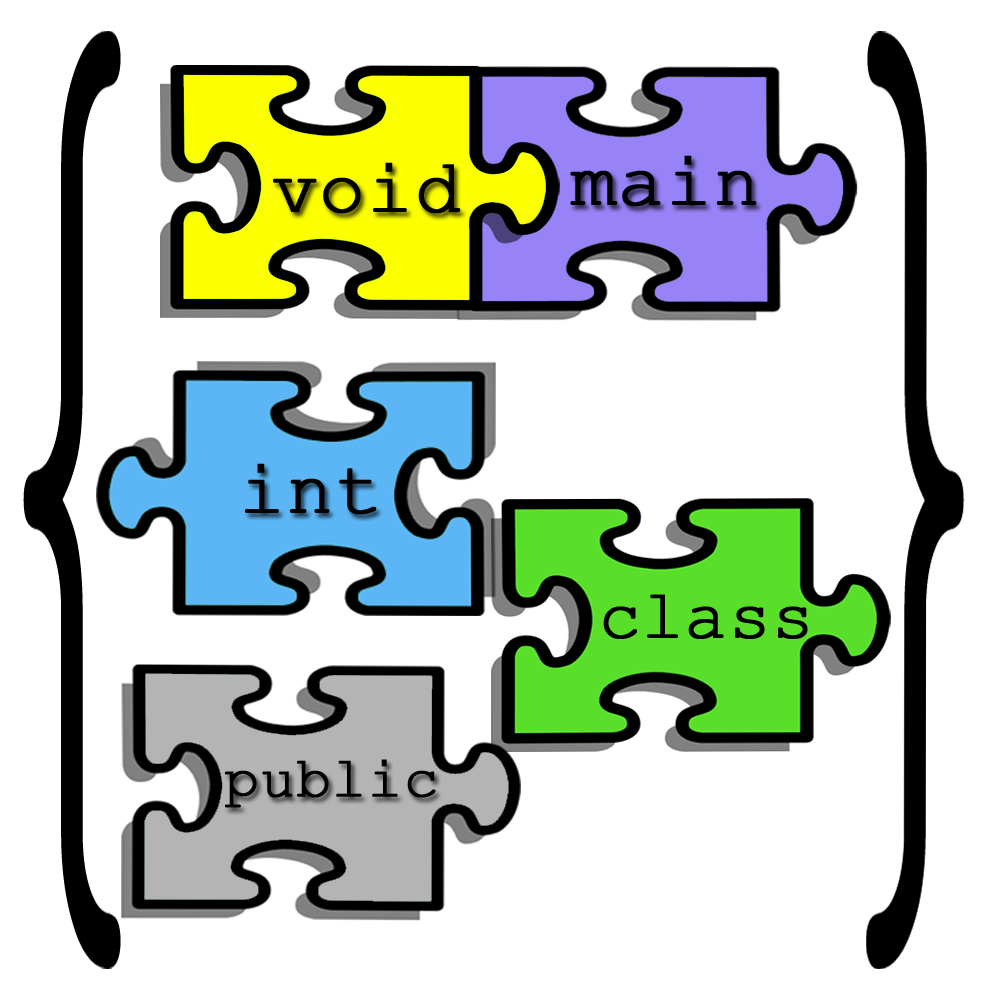
<style>
.page{position:relative;width:1000px;height:1000px;background:#ffffff}
.page>*{position:absolute;margin:0}
.t1{font:76.1px "CourierNewPSMT";color:#000000;font-weight:bold}
.t2{font:69.2px "CourierNewPSMT";color:#000000;font-weight:bold}
.t3{font:57.2px "CourierNewPSMT";color:#000000;font-weight:bold}
</style>
<div class="page">
<p class="t1" style="left:570px;top:155px;width:187px;height:52px">main</p>
<p class="t1" style="left:273px;top:162px;width:188px;height:52px">void</p>
<p class="t1" style="left:245px;top:463px;width:132px;height:52px">int</p>
<p class="t2" style="left:603px;top:594px;width:205px;height:45px">class</p>
<p class="t3" style="left:225px;top:759px;width:211px;height:49px">public</p>
</div>
